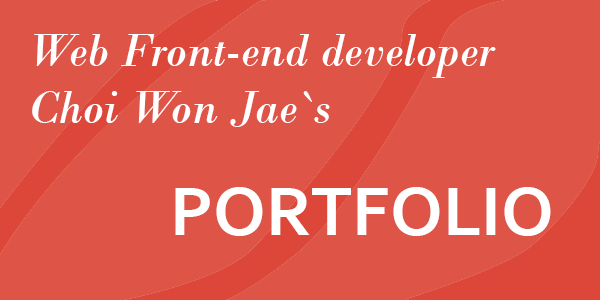
<style>
.page{position:relative;width:600px;height:300px;background:#de5447}
.page>*{position:absolute;margin:0}
.t1{font:48px "BodoniMT-Italic";color:#ffffff}
.t2{font:72px "Corbel-Bold";color:#ffffff}
</style>
<div class="page">
<p class="t1" style="left:32px;top:34px;width:464px;height:93px">Web Front-end developer<br>Choi Won Jae`s</p>
<p class="t2" style="left:175px;top:187px;width:376px;height:49px">PORTFOLIO</p>
</div>
